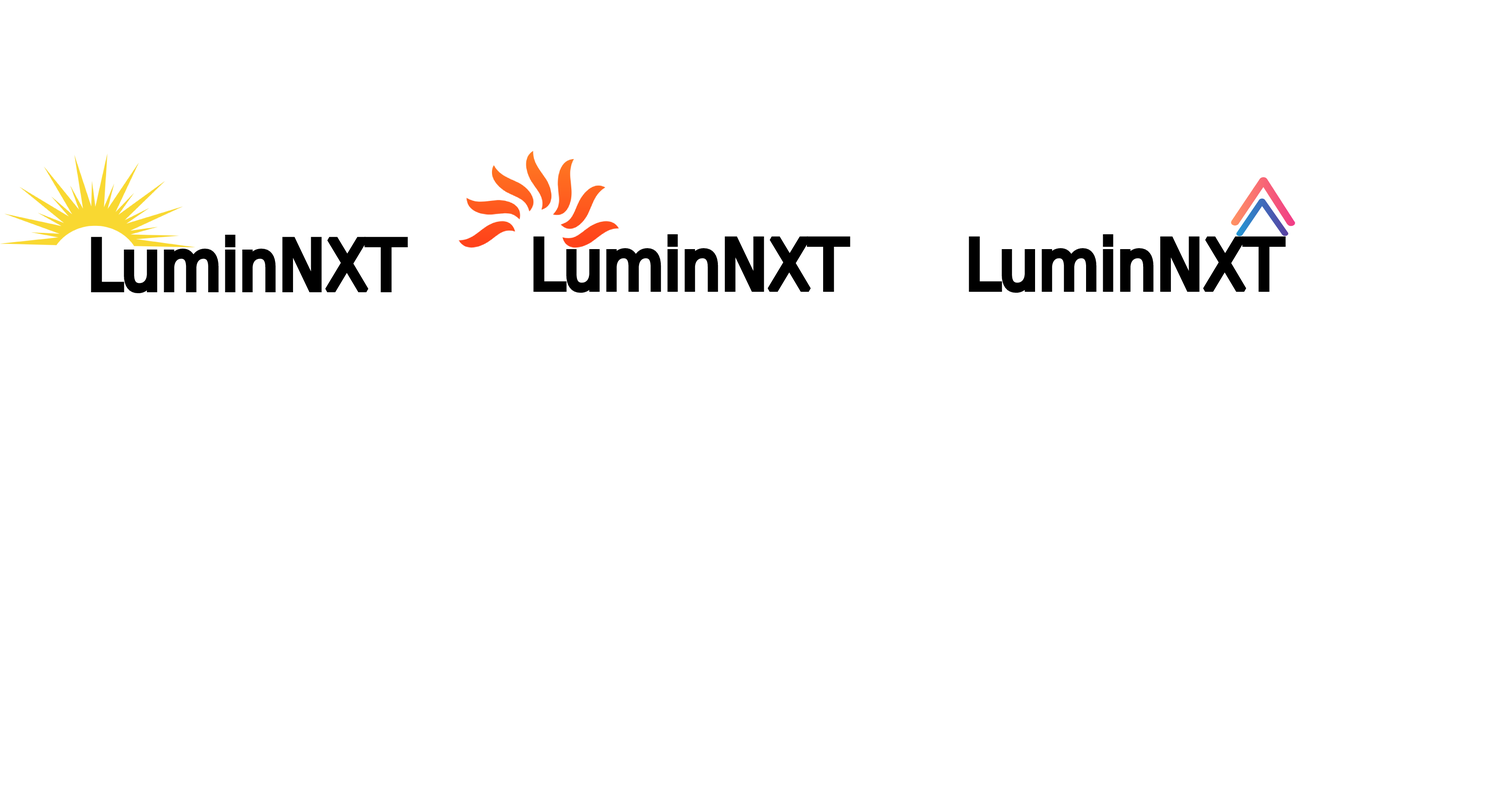
<style>
.page{position:relative;width:1509px;height:790px;background:#ffffff}
.page>*{position:absolute;margin:0}
.t1{font:69.6px "DejaVuSansCondensed";color:#000000}
</style>
<div class="page">
<p class="t1" style="left:91px;top:235px;width:317px;height:59px">LuminNXT</p>
<p class="t1" style="left:533px;top:234px;width:318px;height:59px">LuminNXT</p>
<p class="t1" style="left:969px;top:234px;width:317px;height:59px">LuminNXT</p>
</div>
